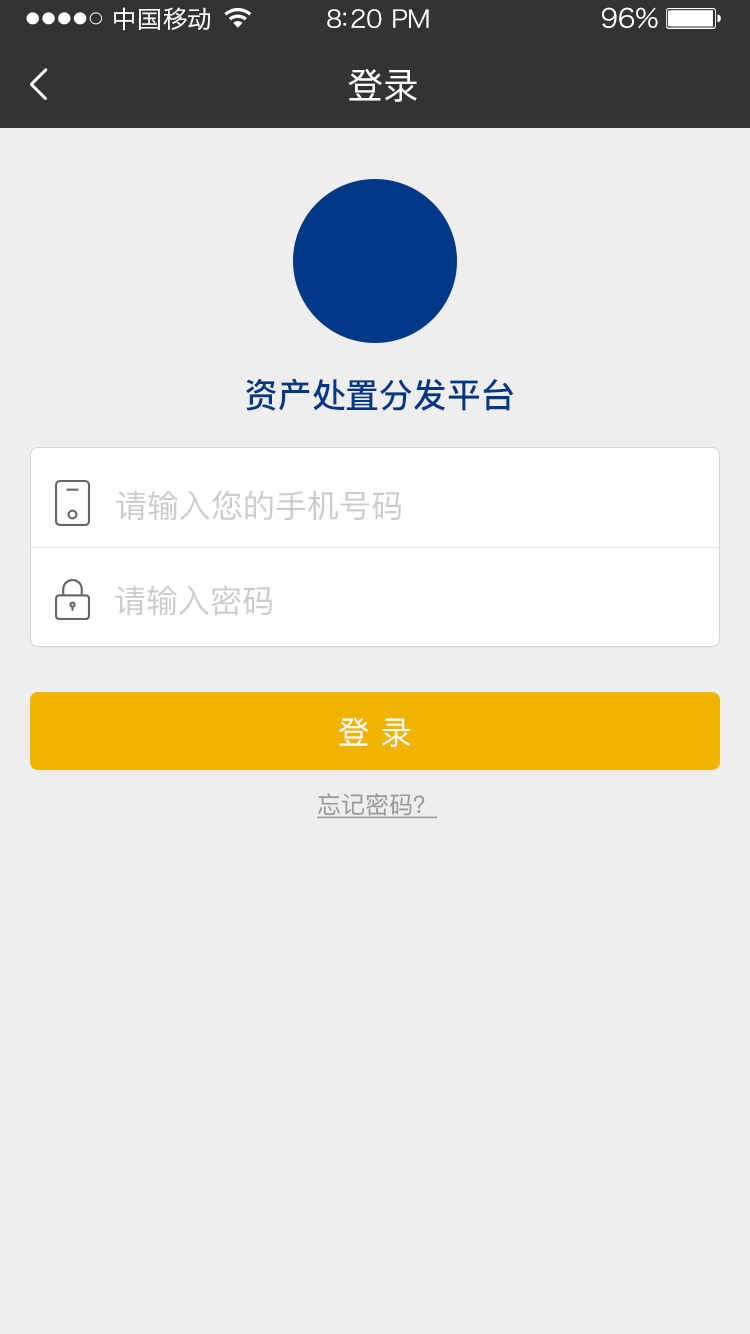
<style>
.page{position:relative;width:750px;height:1334px;background:#eeeeee}
.page>*{position:absolute;margin:0}
.t1{font:24px "HiraginoSansGB-W3";letter-spacing:0.02em;color:#ffffff;scale:1.03 1}
.t2{font:24px "HiraginoSansGB-W3";letter-spacing:-0.02em;color:#ffffff;scale:1.03 1}
.t3{font:26.2px "HiraginoSansGB-W3";letter-spacing:-0.02em;color:#ffffff;scale:1.03 1}
.t4{font:36px "PingFang-SC-Medium";letter-spacing:-0.02em;color:#ffffff}
.t5{font:34px "PingFang-SC-Bold";color:#003888;font-variant:small-caps}
.t6{font:32px "PingFang-SC-Medium";color:#cccccc}
.t7{font:32px "PingFang-SC-Medium";color:#ffffff}
.t8{font:24px "PingFang-SC-Medium";color:#999999;text-decoration:underline}
</style>
<div class="page">
<p class="t1" style="left:114px;top:7px;width:97px;height:24px">中国移动</p>
<p class="t2" style="left:327px;top:9px;width:102px;height:19px">8:20 PM</p>
<p class="t3" style="left:602px;top:7px;width:56px;height:22px">96%</p>
<p class="t4" style="left:348px;top:69px;width:69px;height:33px">登录</p>
<p class="t5" style="left:246px;top:378px;width:268px;height:33px">资产处置分发平台</p>
<p class="t6" style="left:116px;top:490px;width:285px;height:31px">请输入您的手机号码</p>
<p class="t6" style="left:115px;top:585px;width:157px;height:31px">请输入密码</p>
<p class="t7" style="left:339px;top:717px;width:71px;height:30px">登 录</p>
<p class="t8" style="left:317px;top:793px;width:121px;height:26px">忘记密码？</p>
</div>
